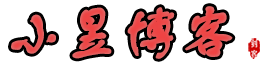
<style>
.page{position:relative;width:260px;height:63px;background:#ffffff}
.page>*{position:absolute;margin:0}
.t1{font:60px "FZSTK--GBK1-0";letter-spacing:-0.059em;color:#e94f4f;font-weight:bold}
</style>
<div class="page">
<p class="t1" style="left:11px;top:6px;width:222px;height:53px">小昱博客</p>
</div>
